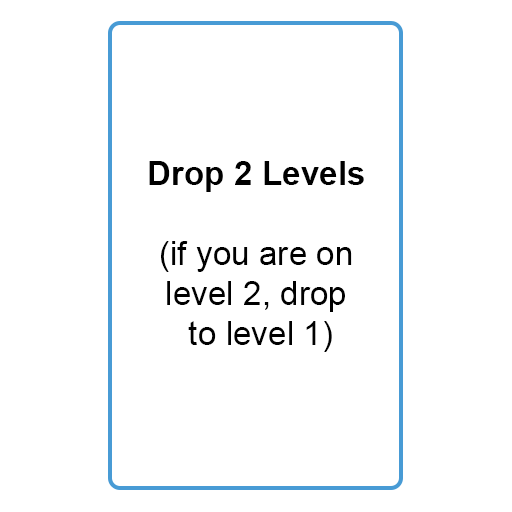
<style>
.page{position:relative;width:512px;height:512px;background:#ffffff}
.page>*{position:absolute;margin:0}
.t1{font:33.3px "ArialMT";color:#000000}
.t2{font:33.3px "Arial-BoldMT";color:#000000}
</style>
<div class="page">
<p class="t1" style="left:149px;top:161px;width:215px;height:191px;text-align:center"><span class="t2">Drop 2 Levels <br></span><br>(if you are on <br>level 2, drop <br>to level 1)</p>
</div>
